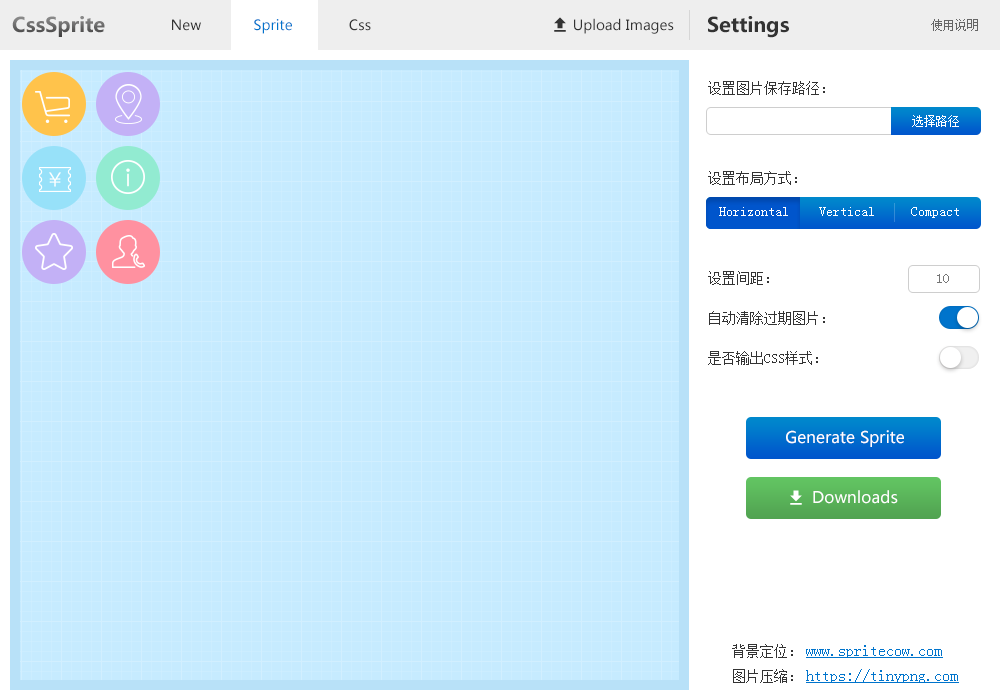
<style>
.page{position:relative;width:1000px;height:700px;background:#c6ebff}
.page>*{position:absolute;margin:0}
.t1{font:20px "MicrosoftYaHei-Bold";color:#595858}
.t2{font:20px "MicrosoftYaHei-Bold";color:#333333}
.t3{font:14px "MicrosoftYaHei";color:#333333}
.t4{font:14px "MicrosoftYaHei";color:#0074cc}
.t5{font:12px "SimSun";color:#666666}
.t6{font:14px "SimSun";color:#333333}
.t7{font:12px "SimSun";color:#ffffff}
.t8{font:14px "SimSun";color:#ffffff}
.t9{font:14px "SimSun";color:#757575}
.t10{font:16px "MicrosoftYaHei";color:#fffefe}
.t11{font:16px "SimSun";color:#0074cc;text-decoration:underline}
</style>
<div class="page">
<p class="t1" style="left:12px;top:16px;width:93px;height:21px">CssSprite</p>
<p class="t2" style="left:708px;top:16px;width:81px;height:22px">Settings</p>
<p class="t3" style="left:172px;top:19px;width:29px;height:12px">New</p>
<p class="t4" style="left:254px;top:19px;width:38px;height:15px">Sprite</p>
<p class="t3" style="left:349px;top:19px;width:22px;height:12px">Css</p>
<p class="t3" style="left:574px;top:18px;width:100px;height:16px">Upload Images</p>
<p class="t5" style="left:931px;top:19px;width:47px;height:12px">使用说明</p>
<p class="t6" style="left:708px;top:81px;width:117px;height:14px">设置图片保存路径：</p>
<p class="t7" style="left:912px;top:115px;width:47px;height:12px">选择路径</p>
<p class="t6" style="left:708px;top:171px;width:89px;height:14px">设置布局方式：</p>
<p class="t8" style="left:719px;top:207px;width:69px;height:9px">Horizontal</p>
<p class="t8" style="left:819px;top:207px;width:55px;height:9px">Vertical</p>
<p class="t8" style="left:911px;top:207px;width:48px;height:11px">Compact</p>
<p class="t6" style="left:708px;top:271px;width:61px;height:14px">设置间距：</p>
<p class="t9" style="left:937px;top:274px;width:12px;height:9px">10</p>
<p class="t6" style="left:709px;top:311px;width:116px;height:14px">自动清除过期图片：</p>
<p class="t6" style="left:708px;top:351px;width:110px;height:14px">是否输出CSS样式：</p>
<p class="t10" style="left:786px;top:430px;width:118px;height:17px">Generate Sprite</p>
<p class="t10" style="left:813px;top:490px;width:85px;height:14px">Downloads</p>
<p class="t6" style="left:732px;top:644px;width:61px;height:14px">背景定位：</p>
<p class="t11" style="left:806px;top:645px;width:137px;height:13px">www.spritecow.com</p>
<p class="t6" style="left:733px;top:669px;width:60px;height:14px">图片压缩：</p>
<p class="t11" style="left:806px;top:669px;width:153px;height:14px">https://tinypng.com</p>
</div>
